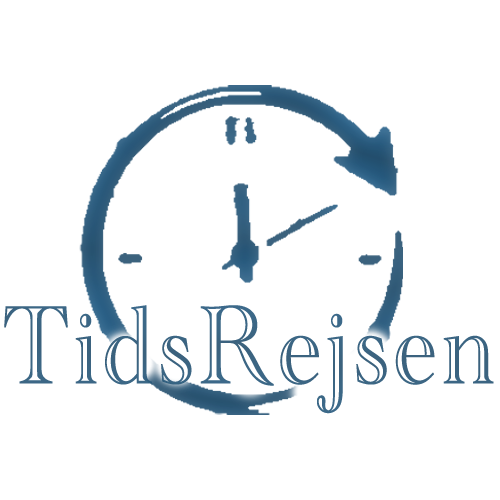
<style>
.page{position:relative;width:500px;height:500px;background:#ffffff}
.page>*{position:absolute;margin:0}
.t1{font:115.6px "AcademyEngravedLetPlain";letter-spacing:0.05em;color:#3b6582;scale:0.83 1}
</style>
<div class="page">
<p class="t1" style="left:4px;top:305px;width:490px;height:109px">TidsRejsen</p>
</div>
